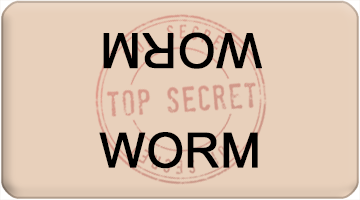
<style>
.page{position:relative;width:360px;height:200px;background:#e8d0bb}
.page>*{position:absolute;margin:0}
.t1{font:48px "ArialMT";color:#000000;font-weight:bold}
</style>
<div class="page">
<p class="t1" style="left:103px;top:32px;width:159px;height:37px;rotate:180deg">WORM</p>
<p class="t1" style="left:99px;top:132px;width:159px;height:37px">WORM</p>
</div>
